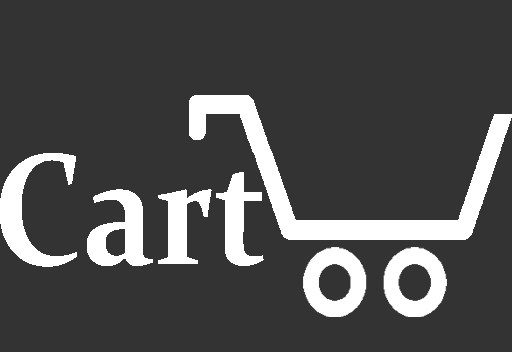
<style>
.page{position:relative;width:512px;height:352px;background:#333333}
.page>*{position:absolute;margin:0}
.t1{font:159.8px "Constantia-Bold";color:#ffffff;scale:0.85 1}
</style>
<div class="page">
<p class="t1" style="left:0px;top:153px;width:264px;height:114px">Cart</p>
</div>
